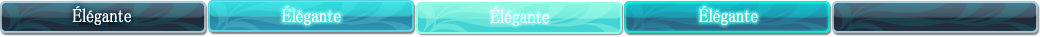
<style>
.page{position:relative;width:1040px;height:37px}
.page>*{position:absolute;margin:0}
.t1{font:19px "MS-PMincho";color:#ffffff;font-weight:bold;scale:0.84 1}
</style>
<div class="page">
<p class="t1" style="left:72px;top:6px;width:59px;height:19px">Élégante</p>
<p class="t1" style="left:282px;top:6px;width:59px;height:19px">Élégante</p>
<p class="t1" style="left:699px;top:6px;width:59px;height:19px">Élégante</p>
<p class="t1" style="left:490px;top:7px;width:59px;height:19px">Élégante</p>
</div>
